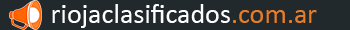
<style>
.page{position:relative;width:350px;height:30px;background:#21292d}
.page>*{position:absolute;margin:0}
.t1{font:28px "Calibri";color:#ffffff}
.t2{font:28px "Calibri";color:#e47e29}
</style>
<div class="page">
<p class="t1" style="left:52px;top:4px;width:265px;height:24px">riojaclasificados<span class="t2">.com.ar</span></p>
</div>
